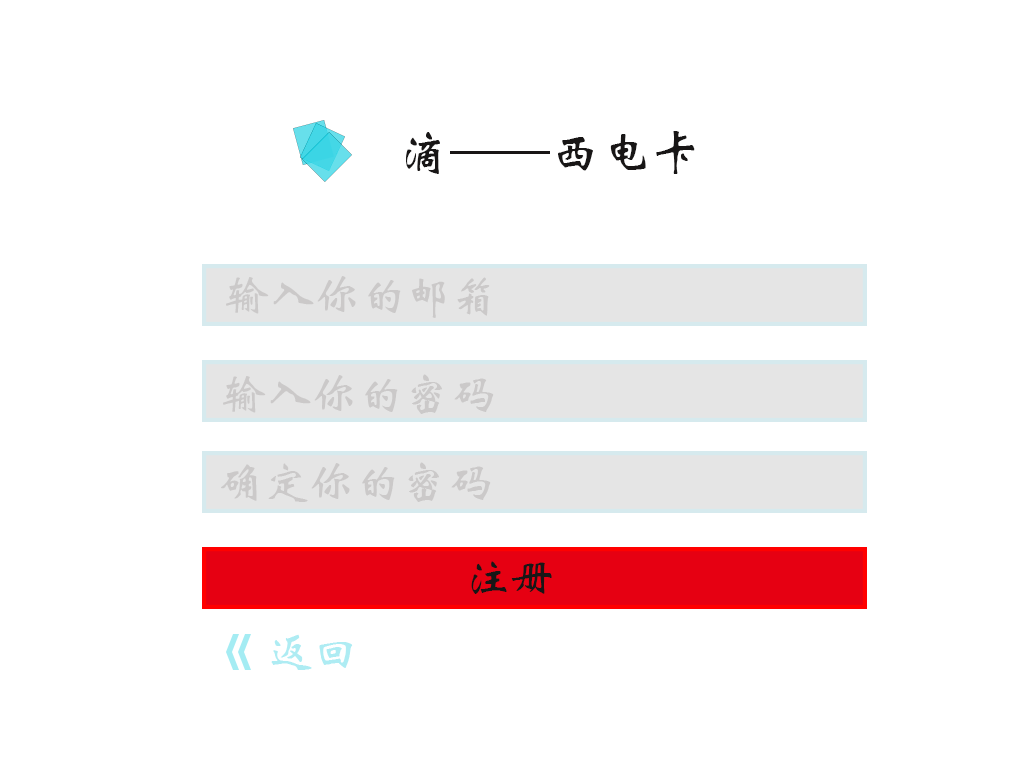
<style>
.page{position:relative;width:1024px;height:768px;background:#ffffff}
.page>*{position:absolute;margin:0}
.t1{font:50px "STXinwei";color:#181616}
.t2{font:45.8px "STXinwei";color:#b8b5b5}
.t3{font:45.8px "STXinwei";color:#181616}
.t4{font:45.8px "STXinwei";color:#aeecf3}
</style>
<div class="page">
<p class="t1" style="left:406px;top:131px;width:289px;height:43px">滴——西电卡</p>
<p class="t2" style="left:226px;top:276px;width:264px;height:42px;opacity:0.6">输入你的邮箱</p>
<p class="t2" style="left:223px;top:374px;width:271px;height:40px;opacity:0.6">输入你的密码</p>
<p class="t2" style="left:221px;top:462px;width:270px;height:40px;opacity:0.6">确定你的密码</p>
<p class="t3" style="left:471px;top:561px;width:81px;height:33px">注册</p>
<p class="t4" style="left:271px;top:634px;width:82px;height:36px">返回</p>
</div>
